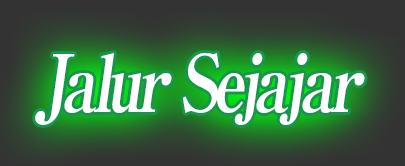
<style>
.page{position:relative;width:405px;height:166px}
.page>*{position:absolute;margin:0}
.t1{font:80px "RyuminPro-ExBold";letter-spacing:-0.08em;color:#ffffff;font-style:italic;scale:0.8 1}
</style>
<div class="page">
<p class="t1" style="left:35px;top:53px;width:330px;height:72px">Jalur Sejajar</p>
</div>
